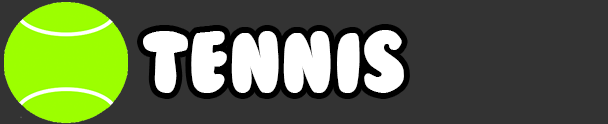
<style>
.page{position:relative;width:608px;height:124px;background:#333333}
.page>*{position:absolute;margin:0}
.t1{font:80px "BubbleGum";color:#ffffff}
</style>
<div class="page">
<p class="t1" style="left:143px;top:30px;width:261px;height:63px">tennis</p>
</div>
